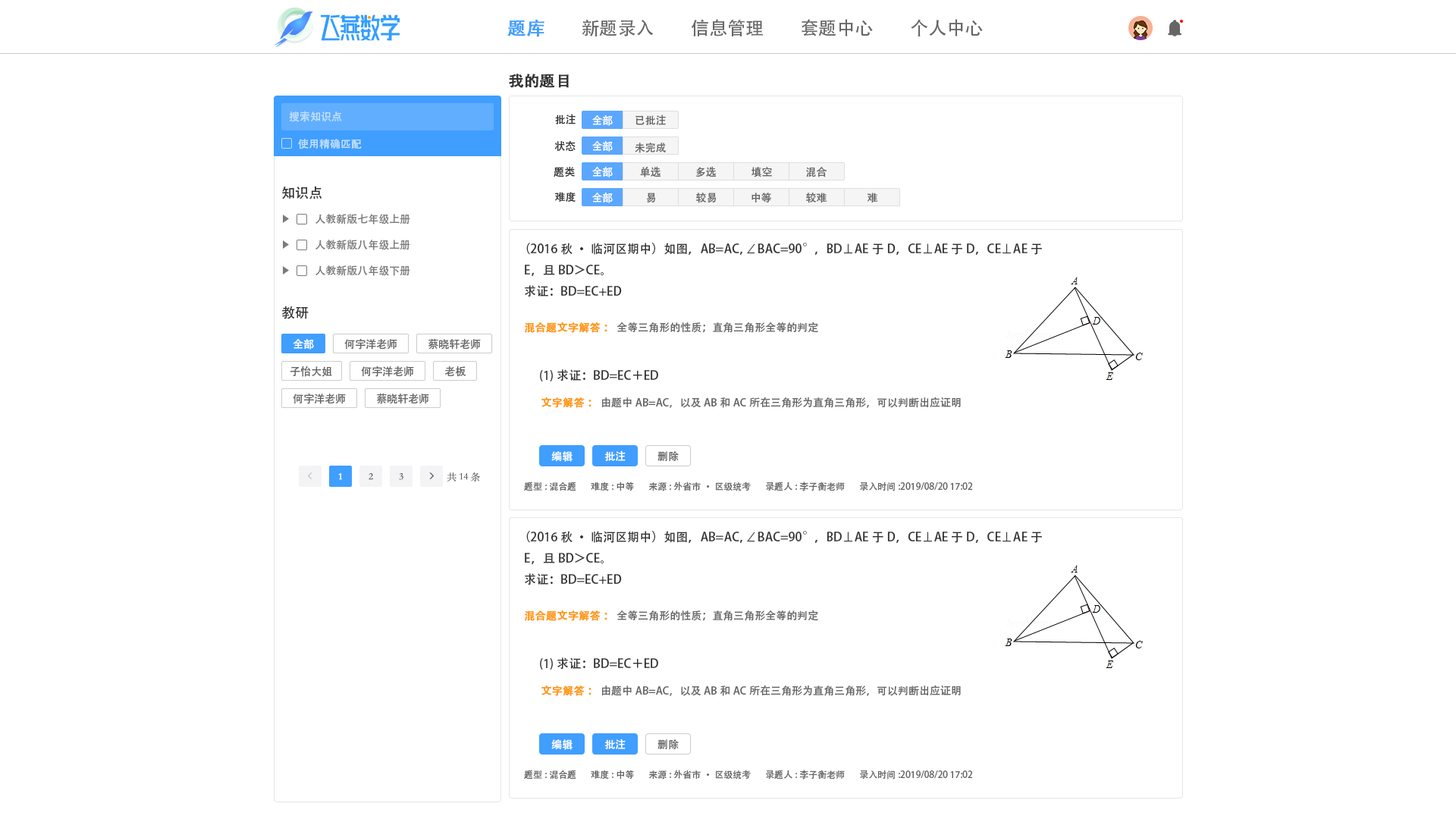
<style>
.page{position:relative;width:1456px;height:819px;background:#ffffff}
.page>*{position:absolute;margin:0}
.t1{font:18.2px "AdobeHeitiStd-Regular";color:#409eff;font-weight:bold}
.t2{font:18.2px "AdobeHeitiStd-Regular";color:#666666}
.t3{font:15.2px "AdobeHeitiStd-Regular";color:#333333;font-weight:bold}
.t4{font:10.6px "AdobeHeitiStd-Regular";color:#c3e0ff}
.t5{font:10.6px "AdobeHeitiStd-Regular";color:#333333}
.t6{font:10.6px "AdobeHeitiStd-Regular";color:#ffffff}
.t7{font:10.6px "AdobeHeitiStd-Regular";color:#666666}
.t8{font:13.6px "AdobeHeitiStd-Regular";color:#333333}
.t9{font:10.6px "AdobeHeitiStd-Regular";color:#7b7b7b}
.t10{font:12.1px "AdobeHeitiStd-Regular";color:#333333}
.t11{font:10.6px "AdobeHeitiStd-Regular";color:#ff9814;font-weight:bold}
.t12{font:9.1px "AdobeHeitiStd-Regular";color:#666666}
</style>
<div class="page">
<p class="t1" style="left:507px;top:20px;width:37px;height:17px">题库</p>
<p class="t2" style="left:582px;top:20px;width:72px;height:16px">新题录入</p>
<p class="t2" style="left:691px;top:19px;width:72px;height:18px">信息管理</p>
<p class="t2" style="left:802px;top:19px;width:71px;height:17px">套题中心</p>
<p class="t2" style="left:911px;top:19px;width:72px;height:17px">个人中心</p>
<p class="t3" style="left:509px;top:74px;width:60px;height:14px">我的题目</p>
<p class="t4" style="left:289px;top:111px;width:53px;height:11px">搜索知识点</p>
<p class="t5" style="left:555px;top:114px;width:21px;height:10px">批注</p>
<p class="t6" style="left:592px;top:115px;width:21px;height:11px">全部</p>
<p class="t7" style="left:635px;top:115px;width:31px;height:10px">已批注</p>
<p class="t4" style="left:298px;top:139px;width:64px;height:10px">使用精确匹配</p>
<p class="t5" style="left:554px;top:141px;width:22px;height:11px">状态</p>
<p class="t6" style="left:592px;top:141px;width:21px;height:11px">全部</p>
<p class="t7" style="left:635px;top:143px;width:31px;height:10px">未完成</p>
<p class="t5" style="left:554px;top:167px;width:21px;height:10px">题类</p>
<p class="t6" style="left:592px;top:167px;width:21px;height:10px">全部</p>
<p class="t7" style="left:640px;top:166px;width:20px;height:11px">单选</p>
<p class="t7" style="left:696px;top:166px;width:20px;height:11px">多选</p>
<p class="t7" style="left:751px;top:167px;width:21px;height:10px">填空</p>
<p class="t7" style="left:806px;top:167px;width:21px;height:10px">混合</p>
<p class="t8" style="left:282px;top:186px;width:40px;height:13px">知识点</p>
<p class="t5" style="left:555px;top:192px;width:21px;height:10px">难度</p>
<p class="t6" style="left:592px;top:193px;width:21px;height:10px">全部</p>
<p class="t7" style="left:646px;top:193px;width:10px;height:10px">易</p>
<p class="t7" style="left:696px;top:193px;width:21px;height:10px">较易</p>
<p class="t7" style="left:751px;top:193px;width:20px;height:9px">中等</p>
<p class="t7" style="left:806px;top:193px;width:21px;height:10px">较难</p>
<p class="t7" style="left:868px;top:193px;width:10px;height:10px">难</p>
<p class="t9" style="left:315px;top:214px;width:95px;height:10px">人教新版七年级上册</p>
<p class="t9" style="left:315px;top:240px;width:95px;height:10px">人教新版八年级上册</p>
<p class="t10" style="left:525px;top:243px;width:517px;height:54px">（2016秋·临河区期中）如图，AB=AC，∠BAC=90°，BD⊥AE于D，CE⊥AE于D，CE⊥AE于E，且BD＞CE。<br>求证：BD=EC+ED</p>
<p class="t9" style="left:315px;top:265px;width:95px;height:11px">人教新版八年级下册</p>
<p class="t8" style="left:281px;top:306px;width:28px;height:13px">教研</p>
<p class="t7" style="left:524px;top:322px;width:294px;height:11px"><span class="t11">混合题文字解答：</span>全等三角形的性质；直角三角形全等的判定</p>
<p class="t6" style="left:293px;top:339px;width:21px;height:11px">全部</p>
<p class="t7" style="left:344px;top:339px;width:53px;height:11px">何宇洋老师</p>
<p class="t7" style="left:428px;top:338px;width:53px;height:12px">蔡晓轩老师</p>
<p class="t7" style="left:290px;top:366px;width:42px;height:11px">子怡大姐</p>
<p class="t7" style="left:361px;top:366px;width:53px;height:11px">何宇洋老师</p>
<p class="t7" style="left:444px;top:366px;width:22px;height:11px">老板</p>
<p class="t10" style="left:540px;top:369px;width:118px;height:12px">(1)求证：BD=EC＋ED</p>
<p class="t7" style="left:293px;top:394px;width:53px;height:10px">何宇洋老师</p>
<p class="t7" style="left:376px;top:393px;width:53px;height:11px">蔡晓轩老师</p>
<p class="t7" style="left:541px;top:397px;width:420px;height:11px"><span class="t11">文字解答：</span>由题中AB=AC，以及AB和AC所在三角形为直角三角形，可以判断出应证明</p>
<p class="t6" style="left:551px;top:451px;width:22px;height:11px">编辑</p>
<p class="t6" style="left:604px;top:450px;width:22px;height:11px">批注</p>
<p class="t7" style="left:657px;top:451px;width:22px;height:10px">删除</p>
<p class="t12" style="left:524px;top:482px;width:52px;height:9px">题型:混合题</p>
<p class="t12" style="left:591px;top:482px;width:43px;height:9px">难度:中等</p>
<p class="t12" style="left:648px;top:482px;width:103px;height:9px">来源:外省市·区级统考</p>
<p class="t12" style="left:766px;top:482px;width:79px;height:9px">录题人:李子衡老师</p>
<p class="t12" style="left:860px;top:482px;width:113px;height:9px">录入时间:2019/08/20 17:02</p>
<p class="t10" style="left:525px;top:531px;width:517px;height:54px">（2016秋·临河区期中）如图，AB=AC，∠BAC=90°，BD⊥AE于D，CE⊥AE于D，CE⊥AE于E，且BD＞CE。<br>求证：BD=EC+ED</p>
<p class="t7" style="left:524px;top:610px;width:294px;height:11px"><span class="t11">混合题文字解答：</span>全等三角形的性质；直角三角形全等的判定</p>
<p class="t10" style="left:540px;top:657px;width:118px;height:13px">(1)求证：BD=EC＋ED</p>
<p class="t7" style="left:541px;top:685px;width:420px;height:11px"><span class="t11">文字解答：</span>由题中AB=AC，以及AB和AC所在三角形为直角三角形，可以判断出应证明</p>
<p class="t6" style="left:551px;top:739px;width:22px;height:11px">编辑</p>
<p class="t6" style="left:604px;top:739px;width:22px;height:10px">批注</p>
<p class="t7" style="left:657px;top:739px;width:22px;height:10px">删除</p>
<p class="t12" style="left:524px;top:770px;width:52px;height:9px">题型:混合题</p>
<p class="t12" style="left:591px;top:770px;width:43px;height:9px">难度:中等</p>
<p class="t12" style="left:648px;top:770px;width:103px;height:10px">来源:外省市·区级统考</p>
<p class="t12" style="left:766px;top:770px;width:79px;height:10px">录题人:李子衡老师</p>
<p class="t12" style="left:860px;top:770px;width:113px;height:10px">录入时间:2019/08/20 17:02</p>
</div>
